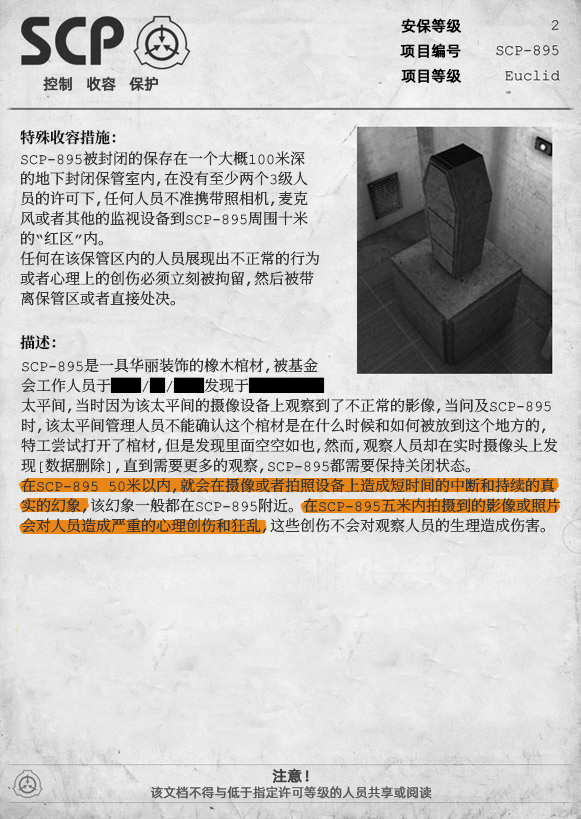
<style>
.page{position:relative;width:581px;height:819px}
.page>*{position:absolute;margin:0}
.t1{font:15px "AlibabaPuHuiTiR";color:#000000;font-weight:bold}
.t2{font:15px "AlibabaPuHuiTiR";color:#3d3d3d;font-weight:bold}
.t3{font:15px "ContainmentBreach-Bold";color:#121212}
.t4{font:15px/20px "ContainmentBreach-Regular";color:#353535}
.t5{font:15px/20px "ContainmentBreach-Regular";color:#000000}
.t6{font:15px "AlibabaPuHuiTiR";color:#414141;font-weight:bold}
.t7{font:13px "AlibabaPuHuiTiR";color:#575757}
</style>
<div class="page">
<p class="t1" style="left:401px;top:18px;width:61px;height:15px">安保等级</p>
<p class="t1" style="left:400px;top:43px;width:61px;height:15px">项目编号</p>
<p class="t2" style="left:43px;top:76px;width:115px;height:15px">控制   收容   保护</p>
<p class="t1" style="left:401px;top:68px;width:61px;height:15px">项目等级</p>
<p class="t3" style="left:20px;top:130px;width:96px;height:15px">特殊收容措施：</p>
<p class="t4" style="left:20px;top:151px;width:300px;height:155px">SCP-895被封闭的保存在一个大概100米深<br>的地下封闭保管室内，在没有至少两个3级人<br>员的许可下，任何人员不准携带照相机，麦克<br>风或者其他的监视设备到SCP-895周围十米<br>的“红区”内。<br>任何在该保管区内的人员展现出不正常的行为<br>或者心理上的创伤必须立刻被拘留，然后被带<br>离保管区或者直接处决。</p>
<p class="t3" style="left:20px;top:335px;width:36px;height:15px">描述：</p>
<p class="t4" style="left:21px;top:358px;width:540px;height:176px">SCP-895是一具华丽装饰的橡木棺材，被基金<br>会工作人员于<span class="t5">██</span>/<span class="t5">█</span>/<span class="t5">██</span>发现于<span class="t5">█████<br></span>太平间，当时因为该太平间的摄像设备上观察到了不正常的影像，当问及SCP-895<br>时，该太平间管理人员不能确认这个棺材是在什么时候和如何被放到这个地方的，<br>特工尝试打开了棺材，但是发现里面空空如也，然而，观察人员却在实时摄像头上发<br>现[数据删除]，直到需要更多的观察，SCP-895都需要保持关闭状态。<br>在SCP-895 50米以内，就会在摄像或者拍照设备上造成短时间的中断和持续的真<br>实的幻象，该幻象一般都在SCP-895附近。在SCP-895五米内拍摄到的影像或照片<br>会对人员造成严重的心理创伤和狂乱，这些创伤不会对观察人员的生理造成伤害。</p>
<p class="t6" style="left:272px;top:768px;width:37px;height:15px">注意！</p>
<p class="t7" style="left:151px;top:786px;width:281px;height:13px">该文档不得与低于指定许可等级的人员共享或阅读</p>
</div>
